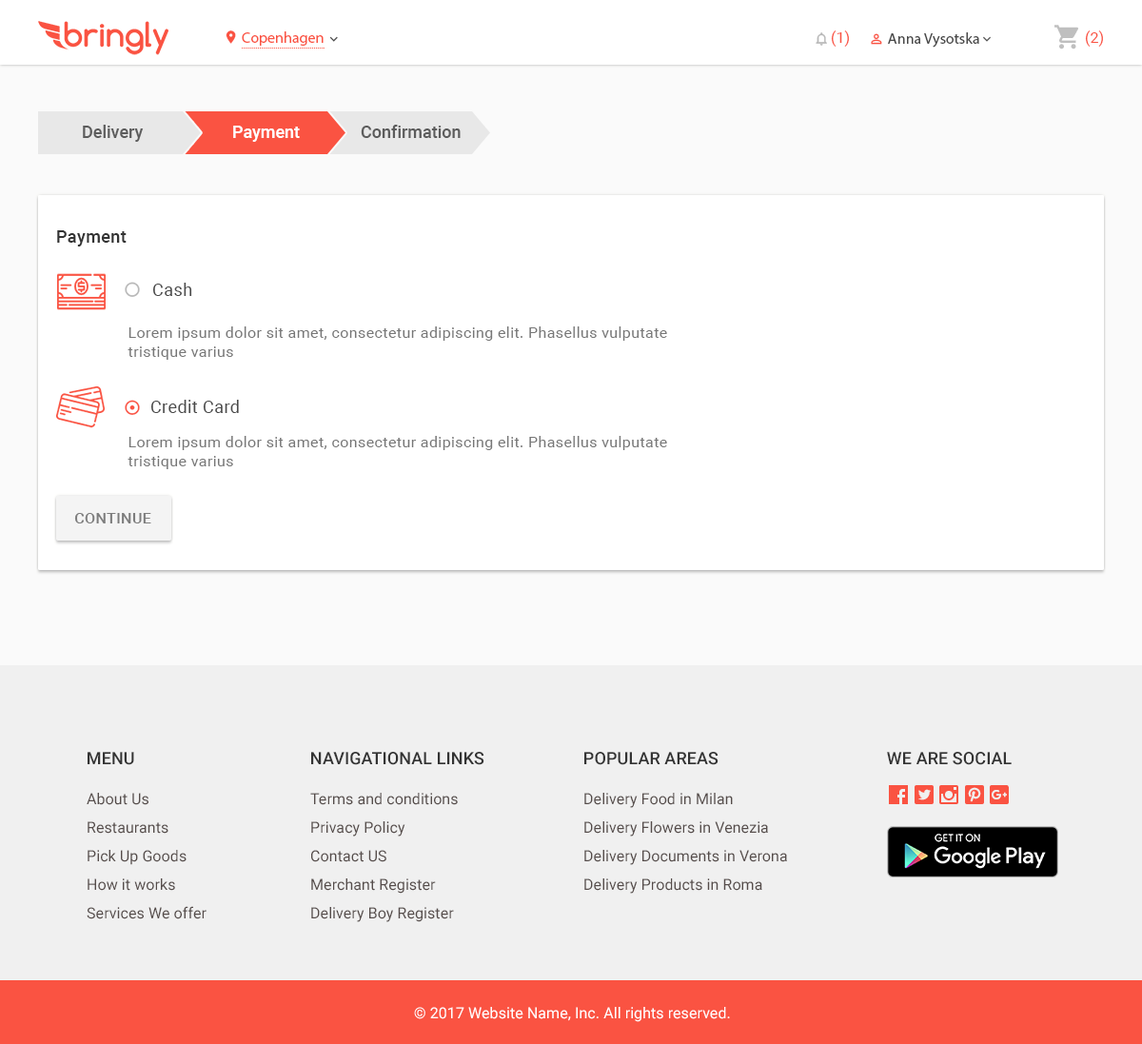
<style>
.page{position:relative;width:1142px;height:1044px;background:#ffffff}
.page>*{position:absolute;margin:0}
.t1{font:15.2px "MyriadPro-Regular";color:#fa5342}
.t2{font:15.2px "Roboto-Regular";color:#fa5342}
.t3{font:15.2px "MyriadPro-Regular";color:#4a4a4a}
.t4{font:17.1px "Roboto-Medium";color:#5c5c5c}
.t5{font:17.1px "Roboto-Medium";color:#ffffff}
.t6{font:17.1px "Roboto-Medium";letter-spacing:0.025em;color:#333333}
.t7{font:17.1px "Roboto-Regular";letter-spacing:0.025em;color:#4a4a4a}
.t8{font:15.2px/19px "Roboto-Regular";letter-spacing:0.025em;color:#777777}
.t9{font:15.2px "Roboto-Medium";letter-spacing:0.025em;color:#7d7d7d;text-transform:uppercase}
.t10{font:17.1px "Roboto-Medium";letter-spacing:0.005em;color:#333333}
.t11{font:17.1px "Roboto-Medium";letter-spacing:0.005em;color:#333333;text-transform:uppercase}
.t12{font:15.2px/28.6px "Roboto-Regular";letter-spacing:0.005em;color:#554c4a}
.t13{font:15.2px "Roboto-Regular";letter-spacing:0.005em;color:#ffffff}
</style>
<div class="page">
<p class="t1" style="left:242px;top:31px;width:82px;height:15px">Copenhagen</p>
<p class="t2" style="left:831px;top:30px;width:18px;height:17px">(1)</p>
<p class="t3" style="left:888px;top:32px;width:91px;height:16px">Anna Vysotska</p>
<p class="t2" style="left:1085px;top:30px;width:18px;height:17px">(2)</p>
<p class="t4" style="left:83px;top:125px;width:61px;height:17px">Delivery</p>
<p class="t5" style="left:233px;top:126px;width:67px;height:16px">Payment</p>
<p class="t4" style="left:361px;top:125px;width:100px;height:13px">Confirmation</p>
<p class="t6" style="left:57px;top:230px;width:70px;height:17px">Payment</p>
<p class="t7" style="left:152px;top:283px;width:40px;height:13px">Cash</p>
<p class="t8" style="left:128px;top:326px;width:539px;height:34px">Lorem ipsum dolor sit amet, consectetur adipiscing elit. Phasellus vulputate tristique varius</p>
<p class="t7" style="left:150px;top:400px;width:89px;height:13px">Credit Card</p>
<p class="t8" style="left:128px;top:436px;width:539px;height:33px">Lorem ipsum dolor sit amet, consectetur adipiscing elit. Phasellus vulputate tristique varius</p>
<p class="t9" style="left:74px;top:513px;width:77px;height:10px">COntinue</p>
<p class="t10" style="left:88px;top:752px;width:46px;height:13px">MENU</p>
<p class="t11" style="left:311px;top:752px;width:173px;height:13px">Navigational Links</p>
<p class="t11" style="left:584px;top:752px;width:135px;height:13px">Popular Areas</p>
<p class="t11" style="left:887px;top:752px;width:125px;height:13px">We are social</p>
<p class="t12" style="left:87px;top:793px;width:120px;height:126px">About Us<br>Restaurants<br>Pick Up Goods <br>How it works <br>Services We offer</p>
<p class="t12" style="left:310px;top:793px;width:148px;height:129px">Terms and conditions<br>Privacy Policy<br>Contact US <br>Merchant Register <br>Delivery Boy Register</p>
<p class="t12" style="left:584px;top:793px;width:203px;height:101px">Delivery Food in Milan<br>Delivery Flowers in Venezia<br>Delivery Documents in Verona<br>Delivery Products in Roma</p>
<p class="t13" style="left:414px;top:1007px;width:316px;height:15px">© 2017 Website Name, Inc. All rights reserved.</p>
</div>
